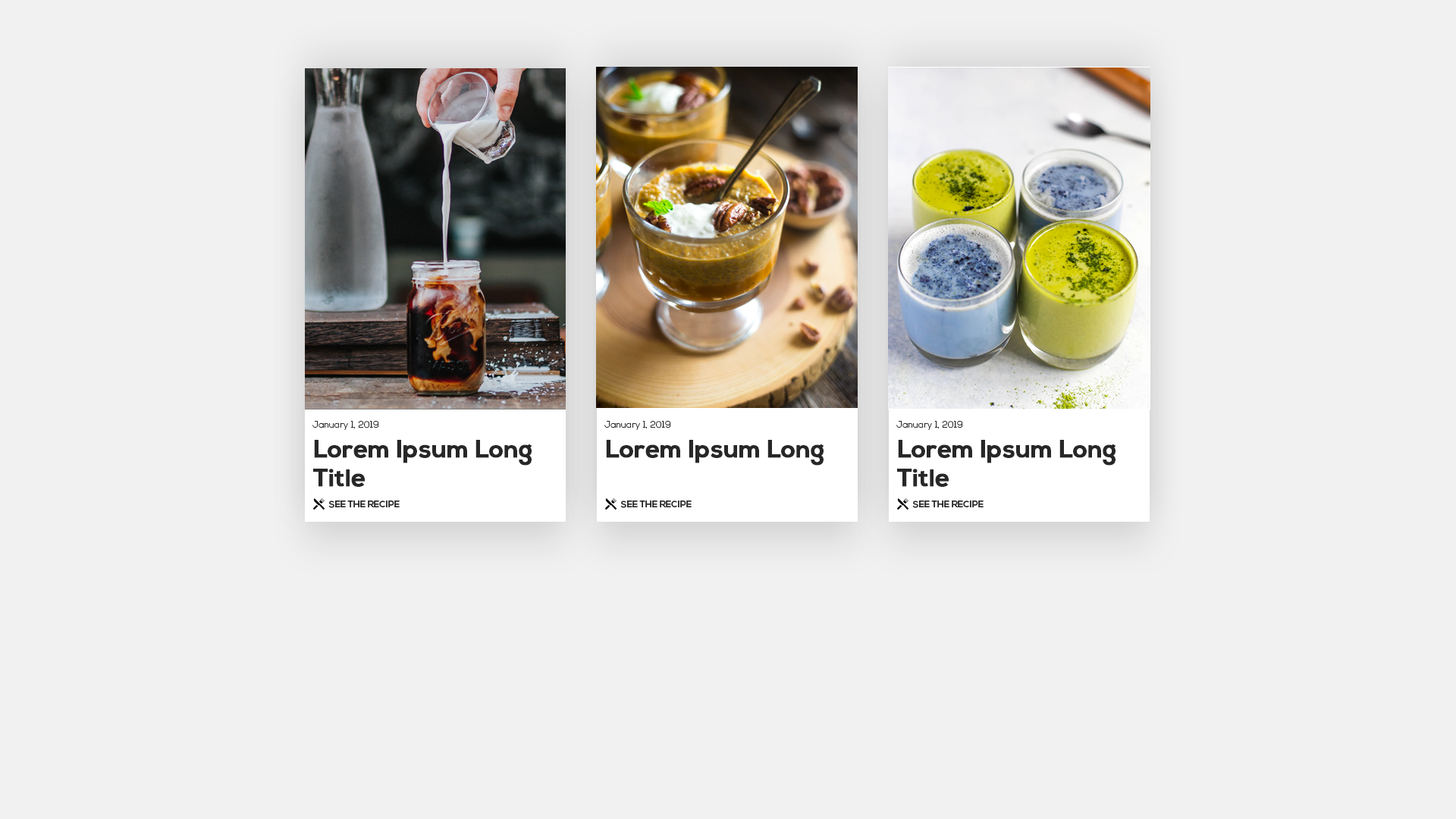
<style>
.page{position:relative;width:1456px;height:819px;background:#f1f1f1}
.page>*{position:absolute;margin:0}
.t1{font:9.1px "NexaLight";color:#272727}
.t2{font:24.3px "NexaBold";color:#272727;font-weight:bold}
.t3{font:9.1px "NexaBold";color:#272727}
</style>
<div class="page">
<p class="t1" style="left:312px;top:421px;width:67px;height:9px">January 1, 2019</p>
<p class="t1" style="left:604px;top:421px;width:67px;height:9px">January 1, 2019</p>
<p class="t1" style="left:896px;top:421px;width:67px;height:9px">January 1, 2019</p>
<p class="t2" style="left:313px;top:440px;width:219px;height:47px">Lorem Ipsum Long Title</p>
<p class="t2" style="left:606px;top:440px;width:218px;height:26px">Lorem Ipsum Long</p>
<p class="t2" style="left:897px;top:440px;width:218px;height:47px">Lorem Ipsum Long Title</p>
<p class="t3" style="left:328px;top:500px;width:72px;height:8px">SEE THE RECIPE</p>
<p class="t3" style="left:620px;top:500px;width:72px;height:8px">SEE THE RECIPE</p>
<p class="t3" style="left:912px;top:500px;width:72px;height:8px">SEE THE RECIPE</p>
</div>
